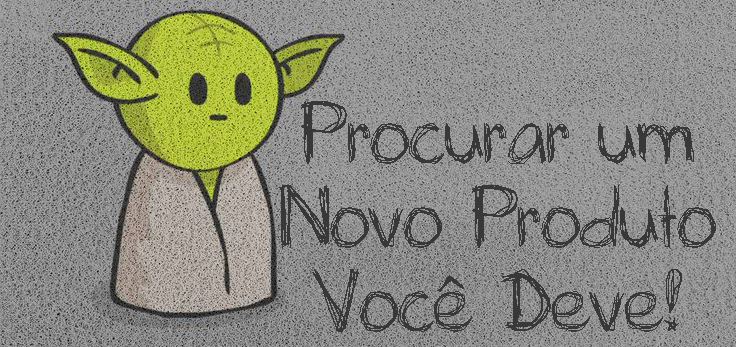
<style>
.page{position:relative;width:736px;height:347px}
.page>*{position:absolute;margin:0}
.t1{font:70px "Mia'sScribblings~";color:#383838}
</style>
<div class="page">
<p class="t1" style="left:279px;top:101px;width:437px;height:231px;text-align:center">Procurar um Novo Produto Você Deve!</p>
</div>
